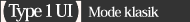
<style>
.page{position:relative;width:190px;height:22px;background:#333333}
.page>*{position:absolute;margin:0}
.t1{font:14px "HeiseiMinStd-W7";letter-spacing:-0.04em;color:#ffffff}
.t2{font:18px "HeiseiMinStd-W7";letter-spacing:-0.08em;color:#ffffff}
</style>
<div class="page">
<p class="t1" style="left:8px;top:4px;width:151px;height:18px"><span class="t2">Type 1 UI     </span>Mode klasik</p>
</div>
